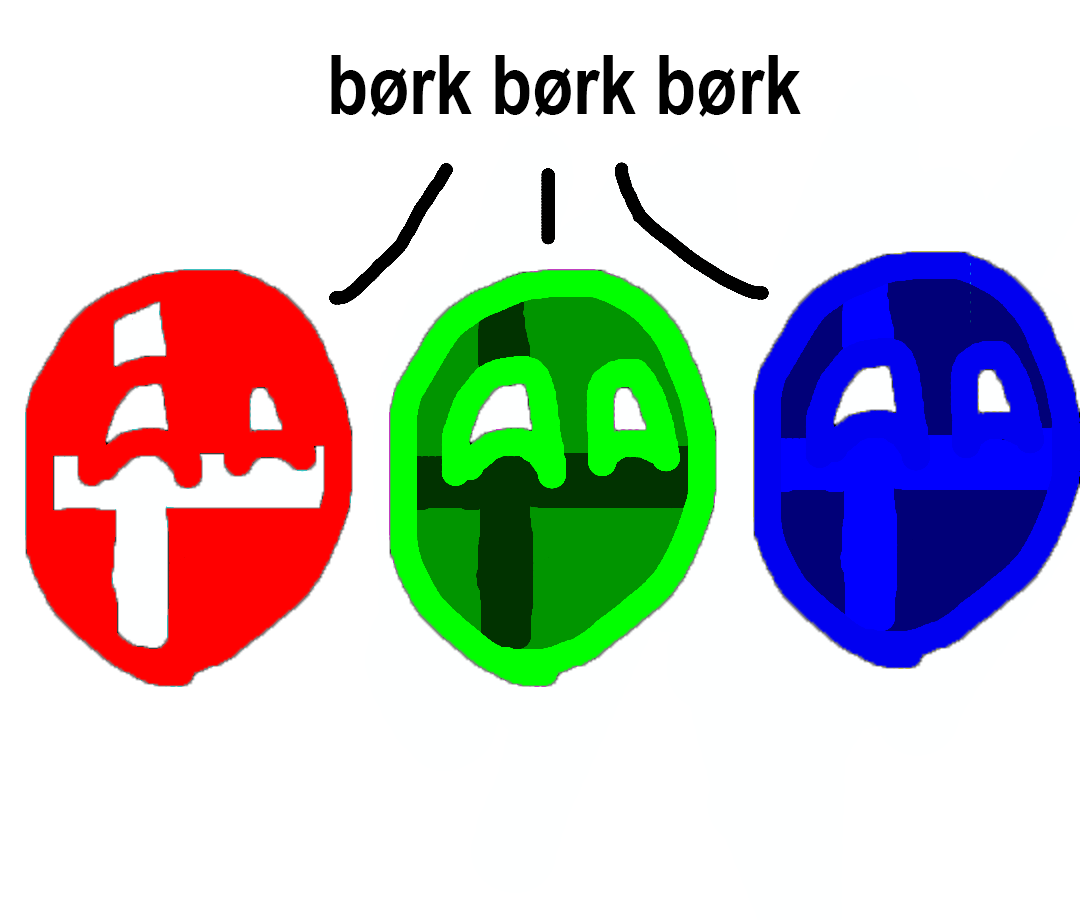
<style>
.page{position:relative;width:1080px;height:920px;background:#ffffff}
.page>*{position:absolute;margin:0}
.t1{font:82px "ArialNarrow-Bold";color:#000000}
</style>
<div class="page">
<p class="t1" style="left:331px;top:55px;width:470px;height:62px">børk børk børk</p>
</div>
